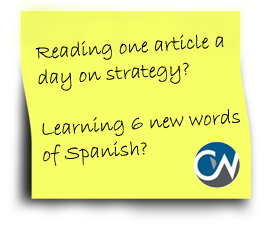
<style>
.page{position:relative;width:277px;height:230px;background:#f6ff66}
.page>*{position:absolute;margin:0}
.t1{font:21.3px "BradleyHandITC";color:#000000}
</style>
<div class="page">
<p class="t1" style="left:35px;top:34px;width:205px;height:132px;rotate:-4deg">Reading one article a<br>day on strategy?<br><br>Learning 6 new words<br>of Spanish?</p>
</div>
